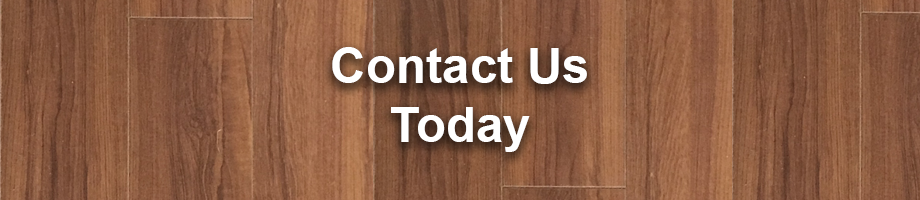
<style>
.page{position:relative;width:920px;height:200px}
.page>*{position:absolute;margin:0}
.t1{font:49.1px "Arial-BoldMT";color:#ffffff}
</style>
<div class="page">
<p class="t1" style="left:332px;top:47px;width:255px;height:105px;text-align:center">Contact Us<br>Today</p>
</div>
